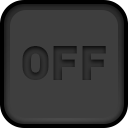
<style>
.page{position:relative;width:128px;height:128px;background:#3e3e3e}
.page>*{position:absolute;margin:0}
.t1{font:48px "DIN-Black";color:#323232}
</style>
<div class="page">
<p class="t1" style="left:22px;top:46px;width:84px;height:34px">OFF</p>
</div>
